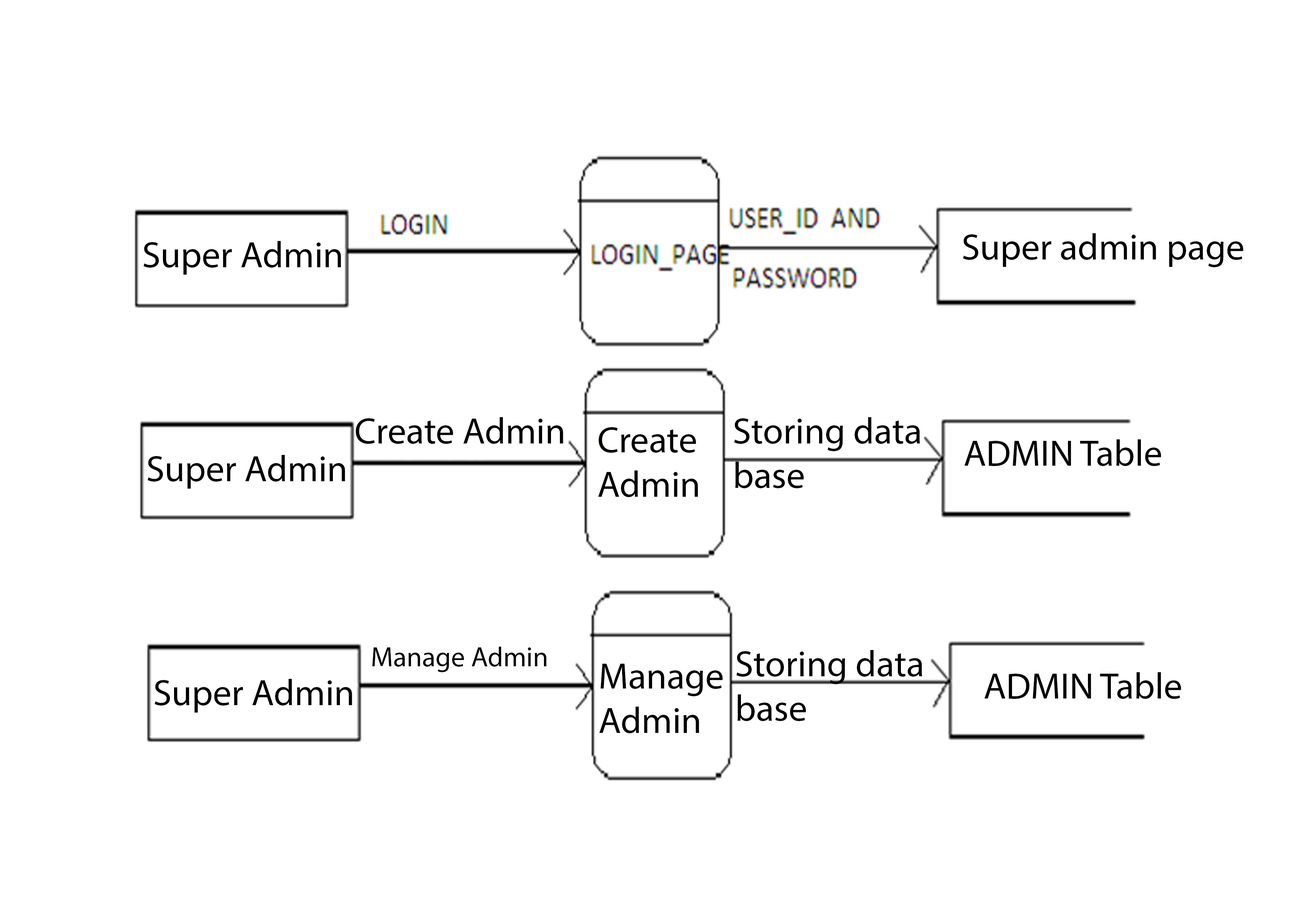
<style>
.page{position:relative;width:1299px;height:918px;background:#ffffff}
.page>*{position:absolute;margin:0}
.t1{font:37px "MyriadHebrew-Regular";color:#000000}
.t2{font:27.8px "MyriadHebrew-Regular";color:#000000}
</style>
<div class="page">
<p class="t1" style="left:963px;top:233px;width:280px;height:34px">Super admin page</p>
<p class="t1" style="left:143px;top:241px;width:198px;height:34px">Super Admin</p>
<p class="t1" style="left:355px;top:417px;width:208px;height:27px">Create Admin</p>
<p class="t1" style="left:734px;top:417px;width:186px;height:71px;text-align:right">Storing data<br>base</p>
<p class="t1" style="left:598px;top:427px;width:100px;height:70px;text-align:right">Create<br>Admin</p>
<p class="t1" style="left:964px;top:439px;width:197px;height:27px">ADMIN Table</p>
<p class="t1" style="left:147px;top:455px;width:198px;height:34px">Super Admin</p>
<p class="t2" style="left:372px;top:647px;width:174px;height:25px">Manage Admin</p>
<p class="t1" style="left:736px;top:650px;width:186px;height:71px;text-align:right">Storing data<br>base</p>
<p class="t1" style="left:599px;top:664px;width:124px;height:69px;text-align:right">Manage<br>Admin</p>
<p class="t1" style="left:984px;top:672px;width:197px;height:27px">ADMIN Table</p>
<p class="t1" style="left:154px;top:679px;width:198px;height:34px">Super Admin</p>
</div>
